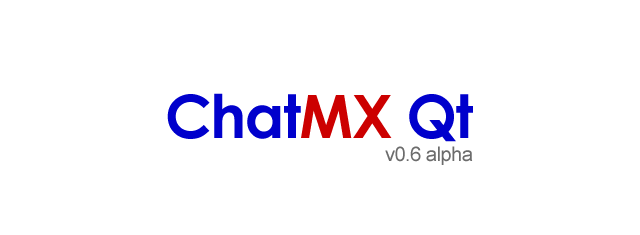
<style>
.page{position:relative;width:640px;height:235px;background:#ffffff}
.page>*{position:absolute;margin:0}
.t1{font:60px "CenturyGothic-Bold";letter-spacing:-0.025em;color:#0000cc}
.t2{font:60px "CenturyGothic-Bold";letter-spacing:-0.025em;color:#cc0000}
.t3{font:20px "ArialMT";letter-spacing:-0.025em;color:#6c6c6c}
</style>
<div class="page">
<p class="t1" style="left:167px;top:93px;width:306px;height:49px">Chat<span class="t2">MX </span>Qt</p>
<p class="t3" style="left:385px;top:146px;width:88px;height:19px">v0.6 alpha</p>
</div>
